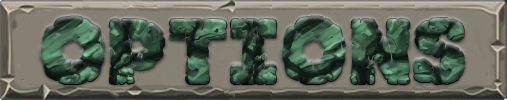
<style>
.page{position:relative;width:507px;height:100px}
.page>*{position:absolute;margin:0}
.t1{font:80px "JFRockSolid"}
</style>
<div class="page">
<p class="t1" style="left:40px;top:16px;width:425px;height:68px">options</p>
</div>
